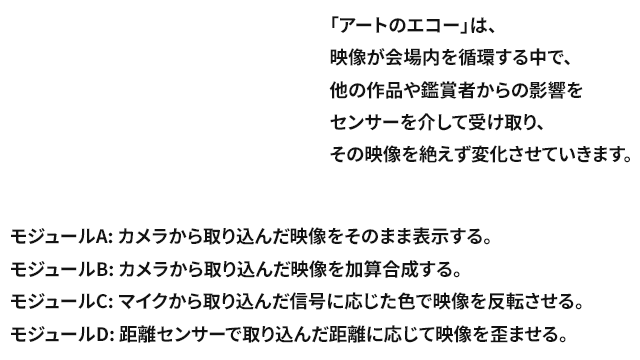
<style>
.page{position:relative;width:640px;height:360px;background:#ffffff}
.page>*{position:absolute;margin:0}
.t1{font:18.5px "NotoSansJP-Bold";color:#131313}
</style>
<div class="page">
<p class="t1" style="left:329px;top:16px;width:301px;height:147px;text-align:justify">「アートのエコー」は、<br>映像が会場内を循環する中で、<br>他の作品や鑑賞者からの影響を<br>センサーを介して受け取り、<br>その映像を絶えず変化させていきます。</p>
<p class="t1" style="left:11px;top:227px;width:571px;height:116px;text-align:justify">モジュールA: カメラから取り込んだ映像をそのまま表示する。<br>モジュールB: カメラから取り込んだ映像を加算合成する。<br>モジュールC: マイクから取り込んだ信号に応じた色で映像を反転させる。<br>モジュールD: 距離センサーで取り込んだ距離に応じて映像を歪ませる。</p>
</div>
